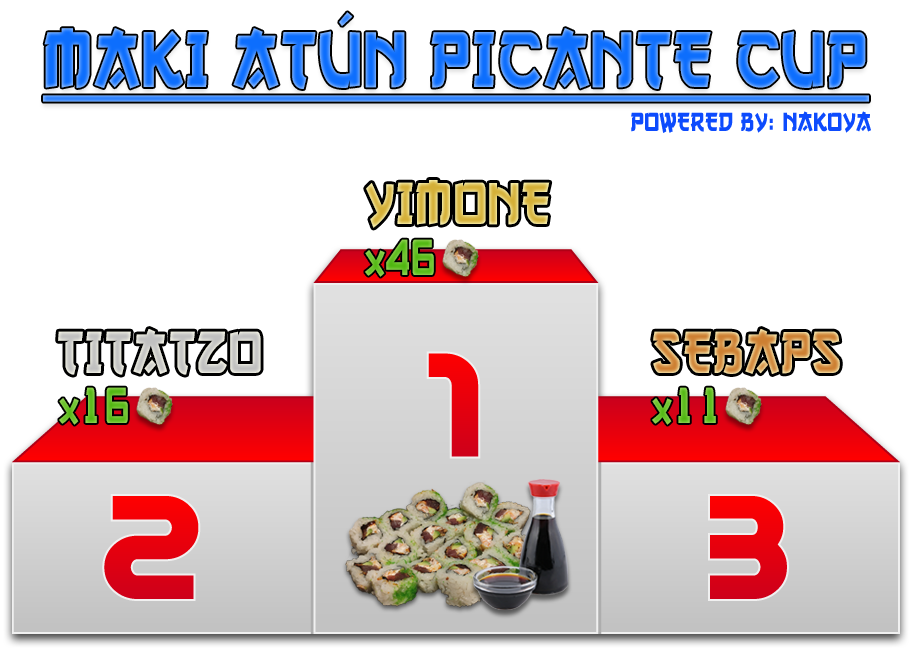
<style>
.page{position:relative;width:912px;height:658px;background:#ffffff}
.page>*{position:absolute;margin:0}
.t1{font:82.8px "GangofThree";letter-spacing:0.025em;text-decoration:underline;scale:0.87 1}
.t2{font:27.6px "GangofThree";letter-spacing:0.025em;color:#0d4bfd;scale:0.87 1}
.t3{font:62.1px "GangofThree";letter-spacing:0.025em;scale:0.87 1}
.t4{font:52.9px "GangofThree";letter-spacing:0.025em;color:#69c12a;scale:0.87 1}
.t5{font:36.8px "GangofThree";letter-spacing:0.025em;color:#69c12a;scale:0.87 1}
.t6{font:62.1px "GangofThree";letter-spacing:0.025em;color:#c0c0c0;scale:0.87 1}
.t7{font:52.9px "GangofThree";letter-spacing:0.025em;color:#6ac22c;scale:0.87 1}
.t8{font:36.8px "GangofThree";letter-spacing:0.025em;color:#6ac22c;scale:0.87 1}
.t9{font:52.9px "GangofThree";letter-spacing:0.025em;color:#6bc22c;scale:0.87 1}
.t10{font:36.8px "GangofThree";letter-spacing:0.025em;color:#6bc22c;scale:0.87 1}
</style>
<div class="page">
<p class="t1" style="left:43px;top:12px;width:826px;height:90px">MAKI ATÚN PICANTE CUP</p>
<p class="t2" style="left:631px;top:111px;width:240px;height:22px">POWERED BY: NAKOYA</p>
<p class="t3" style="left:366px;top:180px;width:184px;height:48px">YIMONE</p>
<p class="t4" style="left:365px;top:239px;width:69px;height:38px"><span class="t5">X</span>46</p>
<p class="t6" style="left:58px;top:329px;width:203px;height:46px">TITATZO</p>
<p class="t3" style="left:653px;top:329px;width:187px;height:45px">SEBAPS</p>
<p class="t7" style="left:59px;top:387px;width:69px;height:38px"><span class="t8">X</span>16</p>
<p class="t9" style="left:652px;top:387px;width:64px;height:38px"><span class="t10">X</span>11</p>
</div>
